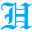
<style>
.page{position:relative;width:32px;height:32px;background:#ffffff}
.page>*{position:absolute;margin:0}
.t1{font:38px "holyunion";color:#00aaff}
</style>
<div class="page">
<p class="t1" style="left:0px;top:2px;width:32px;height:29px">H</p>
</div>
